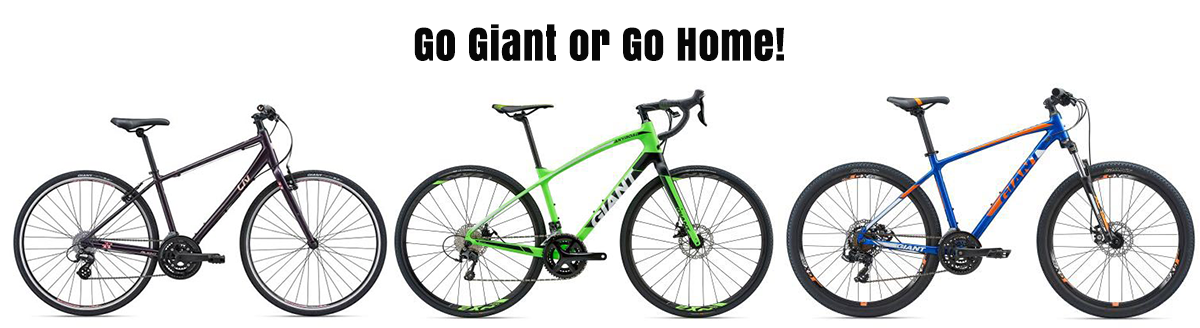
<style>
.page{position:relative;width:1200px;height:328px;background:#ffffff}
.page>*{position:absolute;margin:0}
.t1{font:41.7px "Anton";color:#070707;font-weight:bold}
</style>
<div class="page">
<p class="t1" style="left:414px;top:24px;width:370px;height:38px">Go Giant or Go Home!</p>
</div>
